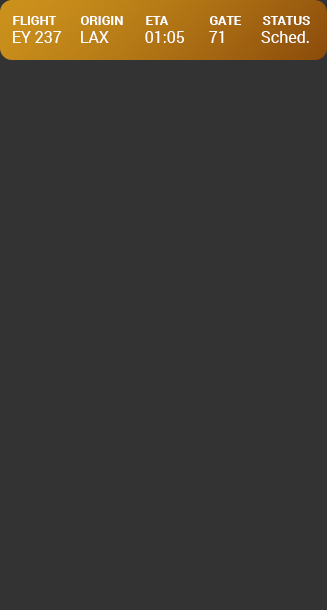
<style>
.page{position:relative;width:327px;height:610px;background:#333333}
.page>*{position:absolute;margin:0}
.t1{font:13px "Roboto-Bold";color:#ffffff;text-transform:uppercase}
.t2{font:16px "Roboto-Regular";color:#ffffff}
</style>
<div class="page">
<p class="t1" style="left:13px;top:16px;width:44px;height:9px">Flight</p>
<p class="t1" style="left:81px;top:16px;width:42px;height:9px">Origin</p>
<p class="t1" style="left:146px;top:16px;width:23px;height:9px">ETA</p>
<p class="t1" style="left:210px;top:16px;width:32px;height:9px">Gate</p>
<p class="t1" style="left:263px;top:16px;width:47px;height:9px">Status</p>
<p class="t2" style="left:13px;top:31px;width:49px;height:12px">EY 237</p>
<p class="t2" style="left:81px;top:31px;width:28px;height:12px">LAX</p>
<p class="t2" style="left:145px;top:31px;width:39px;height:12px">01:05</p>
<p class="t2" style="left:209px;top:31px;width:15px;height:12px">71</p>
<p class="t2" style="left:261px;top:31px;width:48px;height:12px">Sched.</p>
</div>
